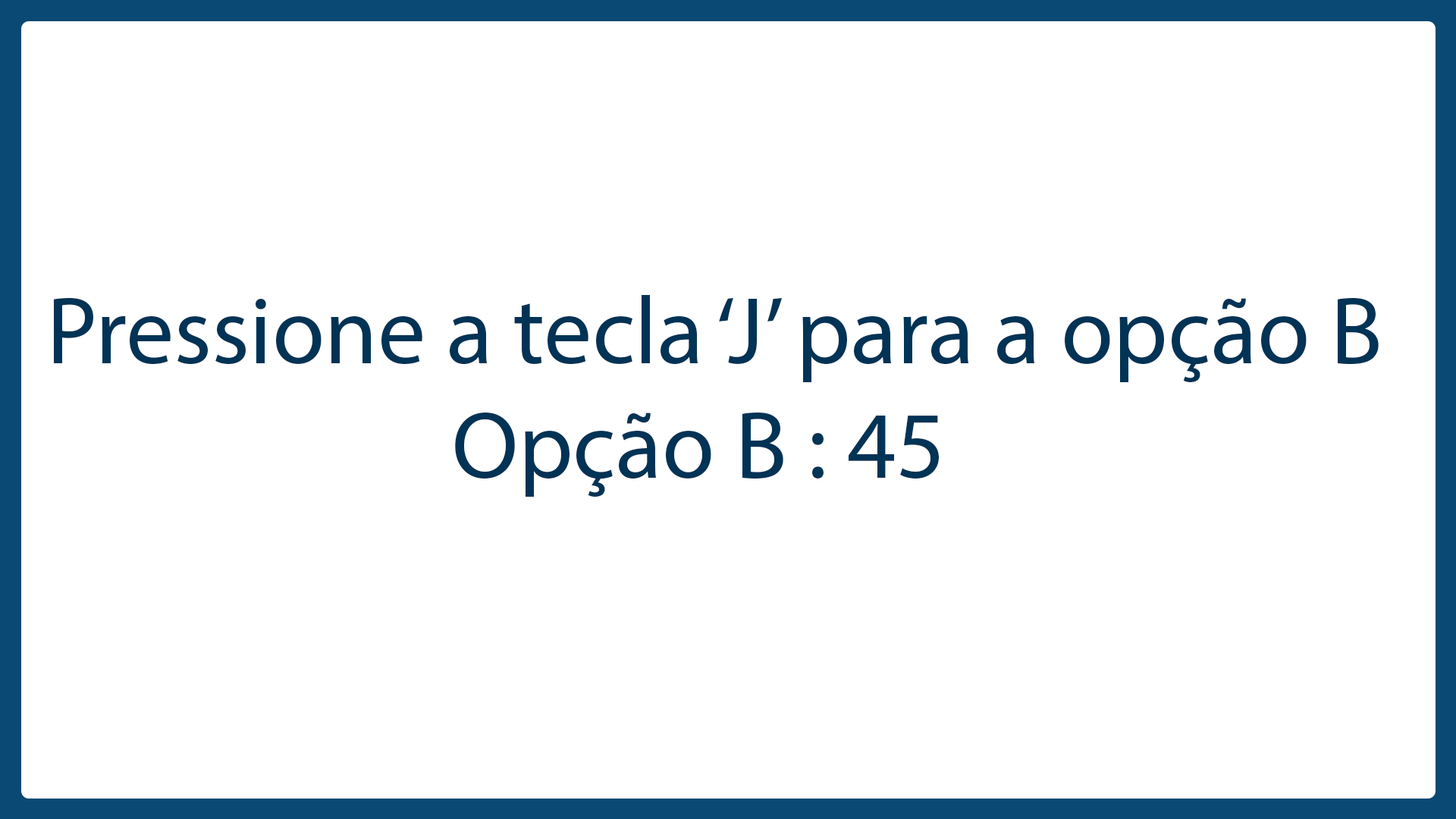
<style>
.page{position:relative;width:1456px;height:819px;background:#ffffff}
.page>*{position:absolute;margin:0}
.t1{font:95.9px "MyriadPro-Regular";color:#003355}
</style>
<div class="page">
<p class="t1" style="left:54px;top:295px;width:1325px;height:202px">Pressione a tecla ‘J’ para a opção B<br>                    Opção B : 45</p>
</div>
